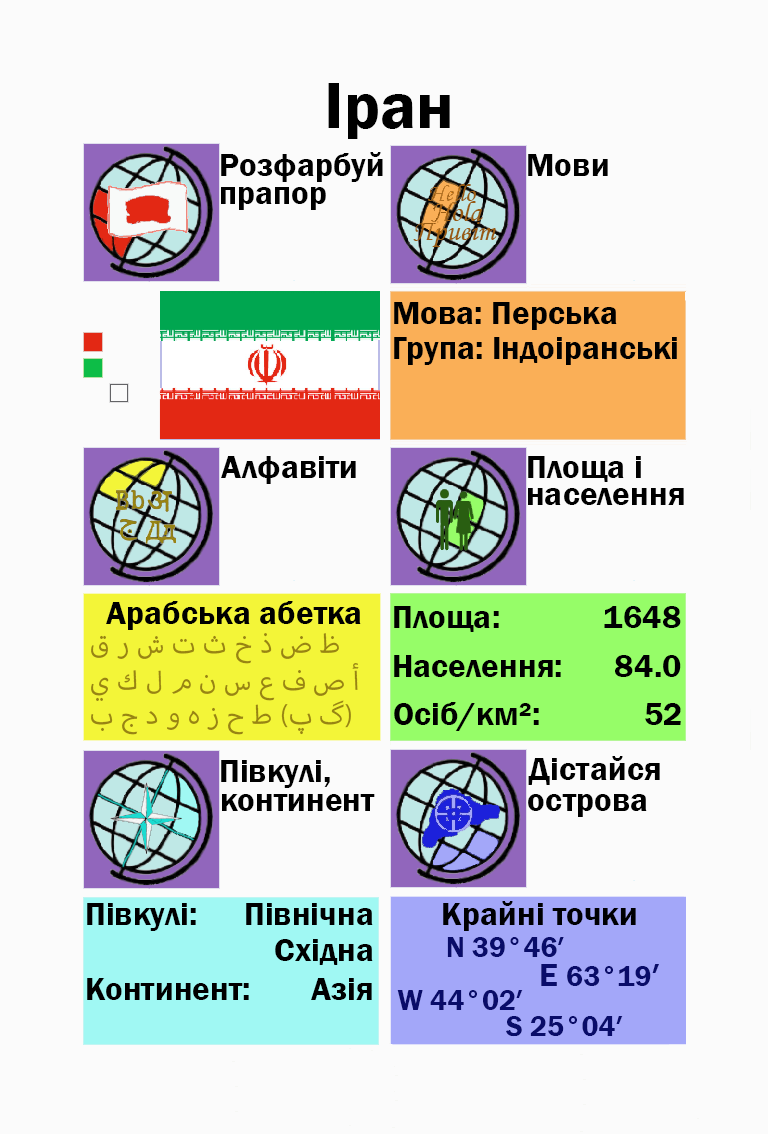
<style>
.page{position:relative;width:768px;height:1134px;background:#fbfbfb}
.page>*{position:absolute;margin:0}
.t1{font:66.7px "FranklinGothic-Demi";color:#000000}
.t2{font:33.3px "FranklinGothic-Demi";color:#000000}
.t3{font:33.3px "FranklinGothic-Demi";color:#000003}
.t4{font:37.5px "MyriadArabic-Regular";color:#988413}
.t5{font:29.2px "FranklinGothic-Demi";color:#988413}
.t6{font:29.2px "FranklinGothic-Demi";color:#090c69}
.t7{font:33.3px "FranklinGothic-Demi";color:#090c69}
</style>
<div class="page">
<p class="t1" style="left:328px;top:83px;width:122px;height:56px">Іран</p>
<p class="t2" style="left:221px;top:152px;width:162px;height:30px">Розфарбуй</p>
<p class="t2" style="left:528px;top:154px;width:80px;height:22px">Мови</p>
<p class="t2" style="left:221px;top:187px;width:105px;height:23px">прапор</p>
<p class="t2" style="left:394px;top:302px;width:223px;height:28px">Мова: Перська</p>
<p class="t2" style="left:394px;top:337px;width:283px;height:28px">Група: Індоіранські</p>
<p class="t2" style="left:221px;top:456px;width:135px;height:28px">Алфавіти</p>
<p class="t2" style="left:528px;top:456px;width:113px;height:26px">Площа і</p>
<p class="t2" style="left:528px;top:488px;width:156px;height:17px">населення</p>
<p class="t2" style="left:106px;top:601px;width:255px;height:29px">Арабська абетка</p>
<p class="t2" style="left:394px;top:606px;width:105px;height:26px">Площа:</p>
<p class="t3" style="left:604px;top:606px;width:77px;height:22px">1648</p>
<p class="t4" style="left:91px;top:633px;width:248px;height:31px"><span class="t5"><br></span>ق ر ش ت ث خ ذ ض ظ</p>
<p class="t4" style="left:91px;top:663px;width:268px;height:38px">ي ك ل م ن س ع ف ص أ</p>
<p class="t2" style="left:394px;top:655px;width:167px;height:22px">Населення:</p>
<p class="t2" style="left:615px;top:655px;width:66px;height:22px">84.0</p>
<p class="t4" style="left:91px;top:700px;width:260px;height:35px">ب ج د و ه ز ح ط (پ گ)</p>
<p class="t2" style="left:394px;top:702px;width:145px;height:29px">Осіб/км²:</p>
<p class="t2" style="left:645px;top:703px;width:36px;height:22px">52</p>
<p class="t2" style="left:221px;top:760px;width:109px;height:28px">Півкулі,</p>
<p class="t2" style="left:528px;top:756px;width:132px;height:29px">Дістайся</p>
<p class="t2" style="left:222px;top:794px;width:153px;height:17px">континент</p>
<p class="t2" style="left:528px;top:794px;width:119px;height:23px">острова</p>
<p class="t2" style="left:87px;top:903px;width:109px;height:28px">Півкулі:</p>
<p class="t2" style="left:246px;top:903px;width:127px;height:22px">Північна</p>
<p class="t3" style="left:443px;top:901px;width:193px;height:30px">Крайні точки</p>
<p class="t2" style="left:275px;top:939px;width:98px;height:26px">Східна</p>
<p class="t6" style="left:447px;top:937px;width:117px;height:20px">N 39°46′</p>
<p class="t6" style="left:541px;top:964px;width:118px;height:22px"><span class="t7">E </span>63°19<span class="t7">′</span></p>
<p class="t2" style="left:87px;top:978px;width:162px;height:22px">Континент:</p>
<p class="t2" style="left:311px;top:978px;width:61px;height:22px">Азія</p>
<p class="t6" style="left:397px;top:990px;width:126px;height:20px">W 44°02′</p>
<p class="t6" style="left:506px;top:1016px;width:117px;height:21px">S 25°04′</p>
</div>
